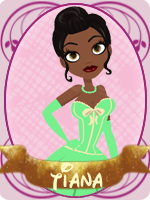
<style>
.page{position:relative;width:150px;height:200px}
.page>*{position:absolute;margin:0}
.t1{font:37.4px "Waltograph";color:#fcfac7}
</style>
<div class="page">
<p class="t1" style="left:50px;top:162px;width:53px;height:29px">tiana</p>
</div>
